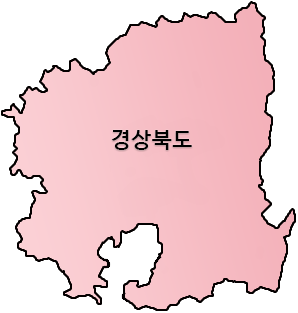
<style>
.page{position:relative;width:298px;height:313px;background:#ffffff}
.page>*{position:absolute;margin:0}
.t1{font:22px "HancomGothicBold";color:#000000}
</style>
<div class="page">
<p class="t1" style="left:111px;top:130px;width:81px;height:20px">경상북도</p>
</div>
